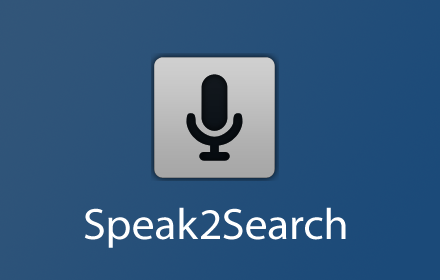
<style>
.page{position:relative;width:440px;height:280px}
.page>*{position:absolute;margin:0}
.t1{font:44px "MyriadPro-Regular";letter-spacing:0.01em;color:#ffffff;scale:1.05 1}
</style>
<div class="page">
<p class="t1" style="left:84px;top:207px;width:262px;height:41px">Speak2Search</p>
</div>
